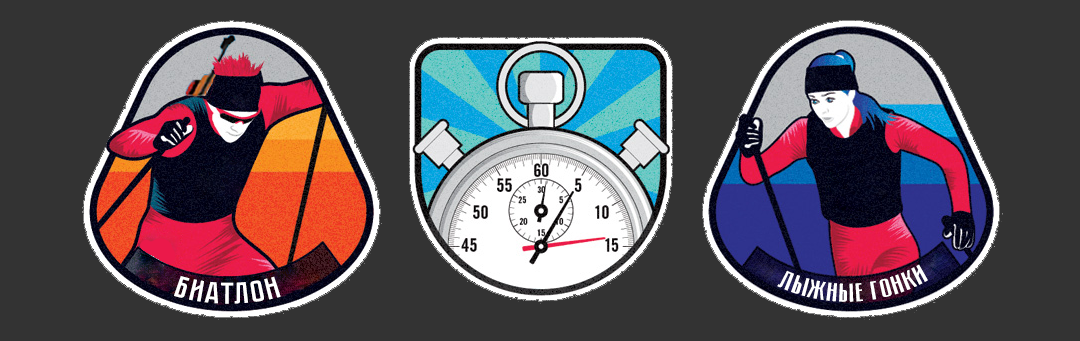
<style>
.page{position:relative;width:1080px;height:341px;background:#333333}
.page>*{position:absolute;margin:0}
.t1{font:25.4px "Pobeda-Bold";color:#ffffff}
.t2{font:29.8px "Pobeda-Bold";color:#ffffff;scale:1.09 1}
</style>
<div class="page">
<p class="t1" style="left:777px;top:264px;width:151px;height:38px;rotate:-3deg">ЛЫЖНЫЕ ГОНКИ</p>
<p class="t2" style="left:174px;top:276px;width:107px;height:28px">БИАТЛОН</p>
</div>
